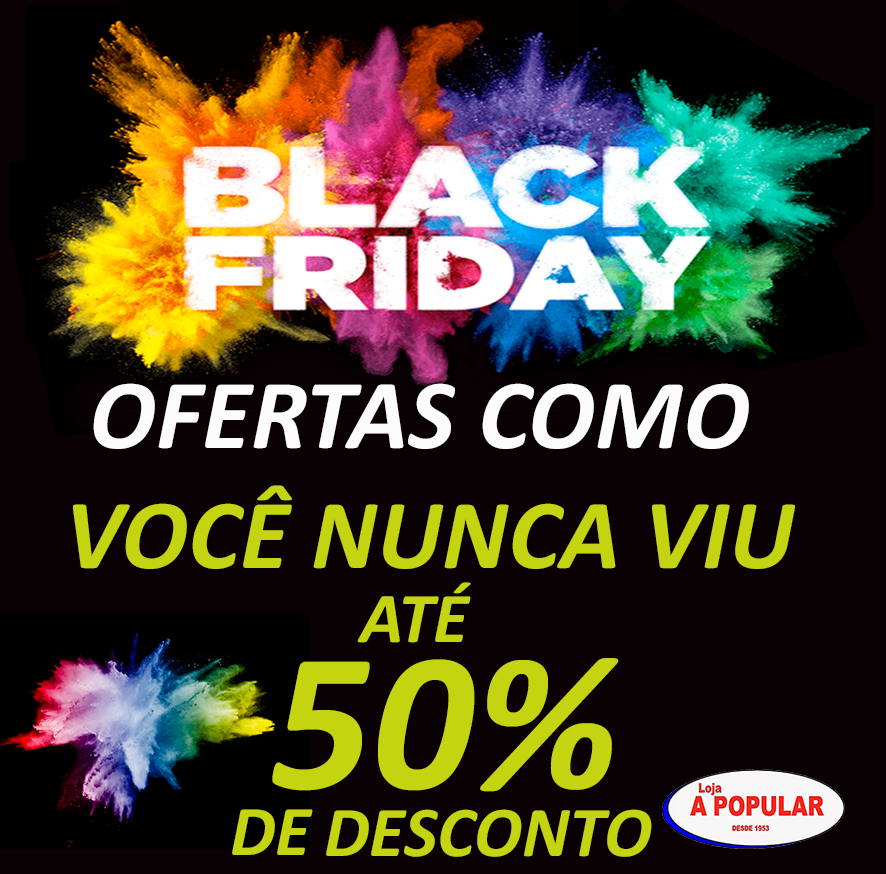
<style>
.page{position:relative;width:886px;height:874px;background:#090104}
.page>*{position:absolute;margin:0}
.t1{font:100px "Calibri-BoldItalic";color:#c4d411}
.t2{font:112px "Calibri-BoldItalic";color:#fcfcfc}
.t3{font:100px "Calibri-BoldItalic";color:#fcfcfc}
.t4{font:72px "Calibri-BoldItalic";color:#c4d411}
.t5{font:200px "Calibri-BoldItalic";color:#c4d411}
.t6{font:112px "Calibri-BoldItalic";color:#c4d411}
</style>
<div class="page">
<p class="t1" style="left:73px;top:383px;width:722px;height:186px"><span class="t2"> </span><span class="t3">OFERTAS COMO <br></span>VOCÊ NUNCA VIU</p>
<p class="t4" style="left:357px;top:582px;width:114px;height:61px">ATÉ</p>
<p class="t5" style="left:272px;top:658px;width:347px;height:134px"><span class="t6">          </span>50%</p>
<p class="t4" style="left:232px;top:809px;width:81px;height:46px">DE</p>
<p class="t4" style="left:326px;top:809px;width:326px;height:48px">DESCONTO</p>
</div>
